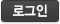
<style>
.page{position:relative;width:60px;height:24px}
.page>*{position:absolute;margin:0}
.t1{font:14px "YDIYGO340";color:#ffffff;scale:0.9 1}
</style>
<div class="page">
<p class="t1" style="left:12px;top:4px;width:35px;height:13px">로그인</p>
</div>
